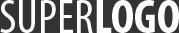
<style>
.page{position:relative;width:179px;height:33px;background:#333333}
.page>*{position:absolute;margin:0}
.t1{font:48px "MyriadPro-Cond";color:#fefeff}
.t2{font:48px "MyriadPro-BoldCond";color:#fefeff}
</style>
<div class="page">
<p class="t1" style="left:0px;top:0px;width:179px;height:33px">SUPER<span class="t2">LOGO</span></p>
</div>
